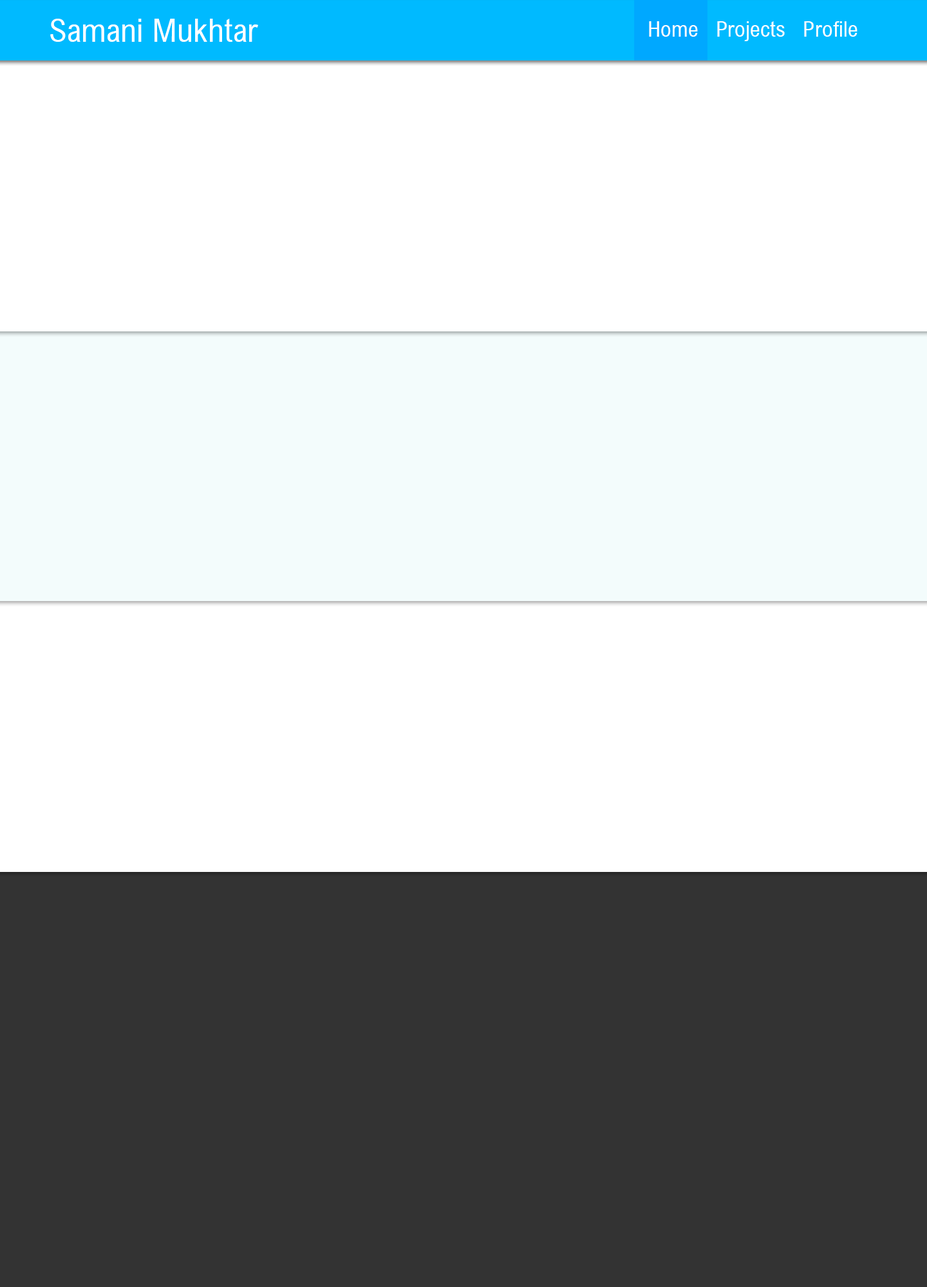
<style>
.page{position:relative;width:927px;height:1287px;background:#ffffff}
.page>*{position:absolute;margin:0}
.t1{font:32.2px "ArialNovaCond";color:#ffffff}
.t2{font:21.4px "ArialNovaCond";color:#ffffff}
</style>
<div class="page">
<p class="t1" style="left:50px;top:19px;width:208px;height:23px">Samani Mukhtar</p>
<p class="t2" style="left:649px;top:21px;width:208px;height:20px">Home   Projects   Profile</p>
</div>
